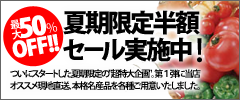
<style>
.page{position:relative;width:240px;height:100px}
.page>*{position:absolute;margin:0}
.t1{font:25.5px "KozGoPro-Heavy";color:#ffffff;font-weight:bold}
.t2{font:12.7px "KozGoPro-Regular";color:#ffffff}
.t3{font:25px/22px "KozGoPro-Heavy";letter-spacing:-0.1em;color:#000000}
.t4{font:25px/22px "KozGoPro-Heavy";letter-spacing:-0.1em;color:#000000;scale:0.9 1}
.t5{font:31px/22px "KozGoPro-Medium";letter-spacing:-0.1em;color:#000000}
.t6{font:10.2px "KozGoPro-Bold";color:#ffffff}
.t7{font:21.2px "KozGoPro-Heavy";letter-spacing:-0.07em;color:#ffffff;font-weight:bold}
.t8{font:9px/12px "KozGoPro-Bold";letter-spacing:-0.155em;color:#000000}
.t9{font:9px/12px "KozGoPro-Bold";letter-spacing:-0.135em;color:#000000}
</style>
<div class="page">
<p class="t1" style="left:19px;top:15px;width:39px;height:23px;rotate:-10deg">50<span class="t2">%</span></p>
<p class="t3" style="left:63px;top:10px;width:139px;height:53px">夏期限定半額<br>セ<span class="t4">ー</span>ル実施中<span class="t5">！</span></p>
<p class="t6" style="left:10px;top:19px;width:13px;height:21px;rotate:-10deg">最大</p>
<p class="t7" style="left:12px;top:34px;width:48px;height:24px;rotate:-10deg">OFF!!</p>
<p class="t8" style="left:10px;top:69px;width:191px;height:21px">ついにスタートした夏期限定の"超特大企画"。第１弾に当店<br><span class="t9">オススメ現地直送、本格名産品を各種ご用意いたしました。</span></p>
</div>
